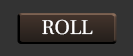
<style>
.page{position:relative;width:133px;height:56px;background:#333333}
.page>*{position:absolute;margin:0}
.t1{font:20px "UnJamoBatang";color:#ffffff}
</style>
<div class="page">
<p class="t1" style="left:42px;top:19px;width:51px;height:16px">ROLL</p>
</div>
